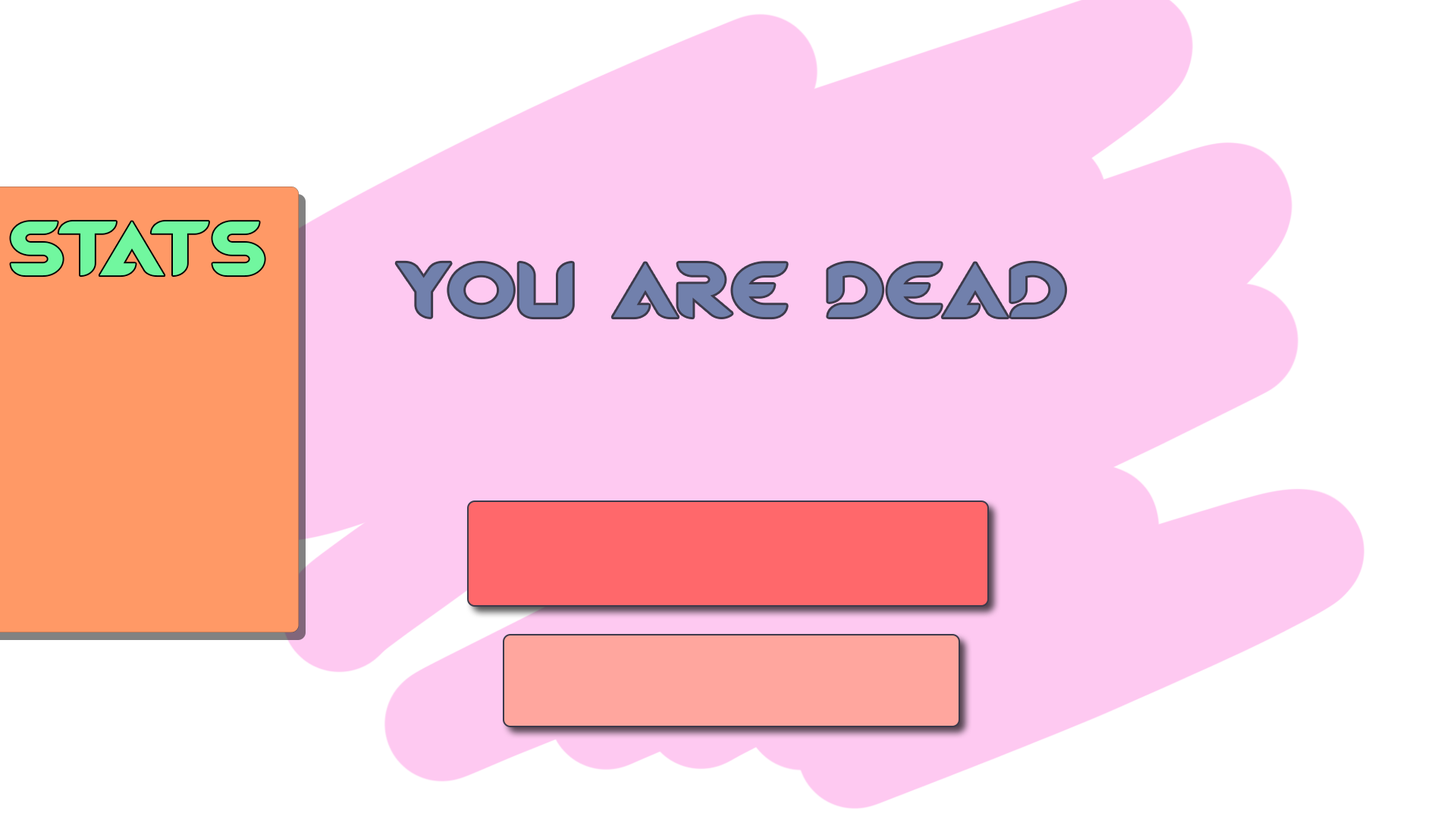
<style>
.page{position:relative;width:1456px;height:819px;background:#fec9f1}
.page>*{position:absolute;margin:0}
.t1{font:74.3px "MagmawaveCaps-Bold";color:#71f79f;scale:1.2 1}
.t2{font:74.3px "MagmawaveCaps-Bold";color:#7180ac;scale:1.2 1}
</style>
<div class="page">
<p class="t1" style="left:11px;top:221px;width:254px;height:55px">Stats</p>
<p class="t2" style="left:397px;top:262px;width:668px;height:56px">YOU ARE DEAD</p>
</div>
